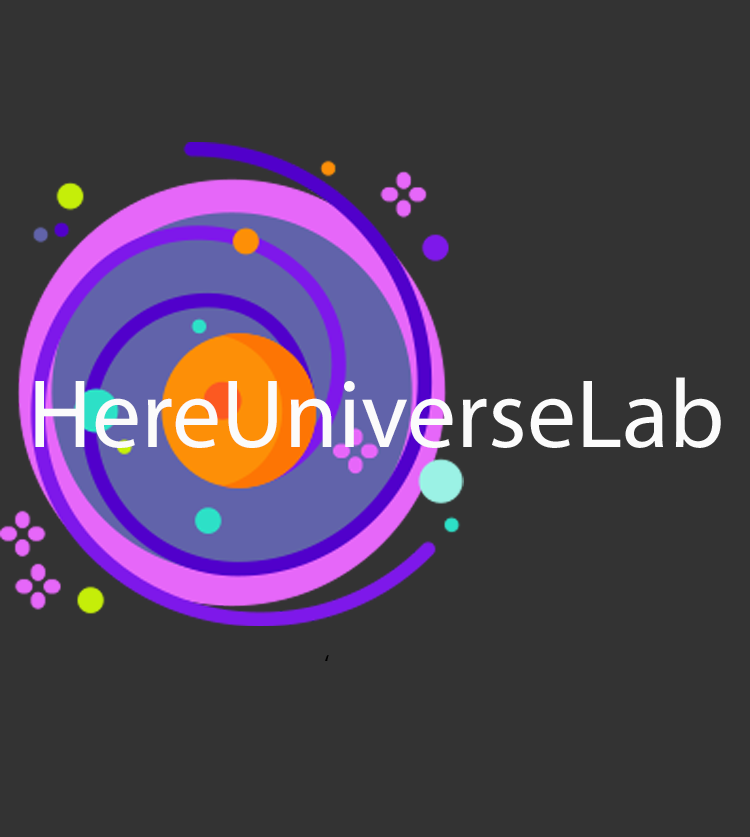
<style>
.page{position:relative;width:750px;height:837px;background:#333333}
.page>*{position:absolute;margin:0}
.t1{font:97.8px "MyriadPro-Regular";color:#fbfbfb}
.t2{font:25px "MyriadPro-Regular";color:#000000}
</style>
<div class="page">
<p class="t1" style="left:35px;top:377px;width:686px;height:71px">HereUniverseLab</p>
<p class="t2" style="left:325px;top:655px;width:4px;height:6px">‘</p>
</div>
